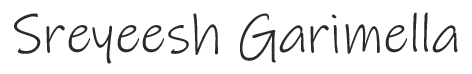
<style>
.page{position:relative;width:472px;height:74px;background:#ffffff}
.page>*{position:absolute;margin:0}
.t1{font:55.3px "InkFree";color:#2a2a27}
</style>
<div class="page">
<p class="t1" style="left:14px;top:12px;width:444px;height:52px">Sreyeesh Garimella</p>
</div>
